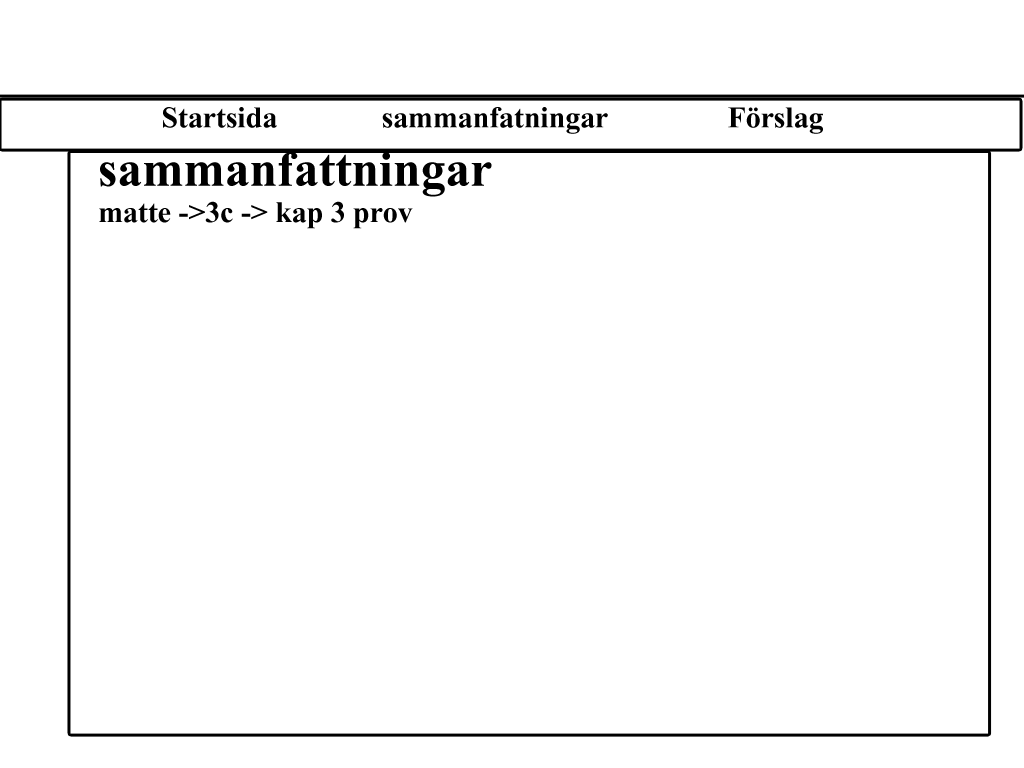
<style>
.page{position:relative;width:1024px;height:768px;background:#ffffff}
.page>*{position:absolute;margin:0}
.t1{font:36px "ShonarBangla-Bold";color:#000000}
.t2{font:60px "ShonarBangla-Bold";color:#000000}
</style>
<div class="page">
<p class="t1" style="left:163px;top:107px;width:660px;height:27px">Startsida              sammanfatningar                Förslag</p>
<p class="t2" style="left:100px;top:152px;width:392px;height:45px">sammanfattningar</p>
<p class="t1" style="left:99px;top:201px;width:314px;height:28px">matte -&gt;3c -&gt; kap 3 prov</p>
</div>
